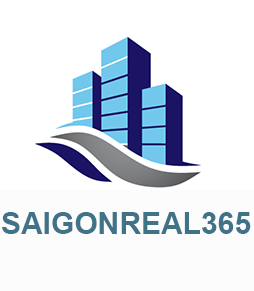
<style>
.page{position:relative;width:254px;height:291px;background:#ffffff}
.page>*{position:absolute;margin:0}
.t1{font:30px "Arial-BoldMT";color:#407388}
</style>
<div class="page">
<p class="t1" style="left:2px;top:212px;width:249px;height:22px">SAIGONREAL365</p>
</div>
